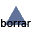
<style>
.page{position:relative;width:32px;height:32px;background:#ffffff}
.page>*{position:absolute;margin:0}
.t1{font:12px "Calibri";color:#000000}
</style>
<div class="page">
<p class="t1" style="left:1px;top:19px;width:30px;height:8px">borrar</p>
</div>
